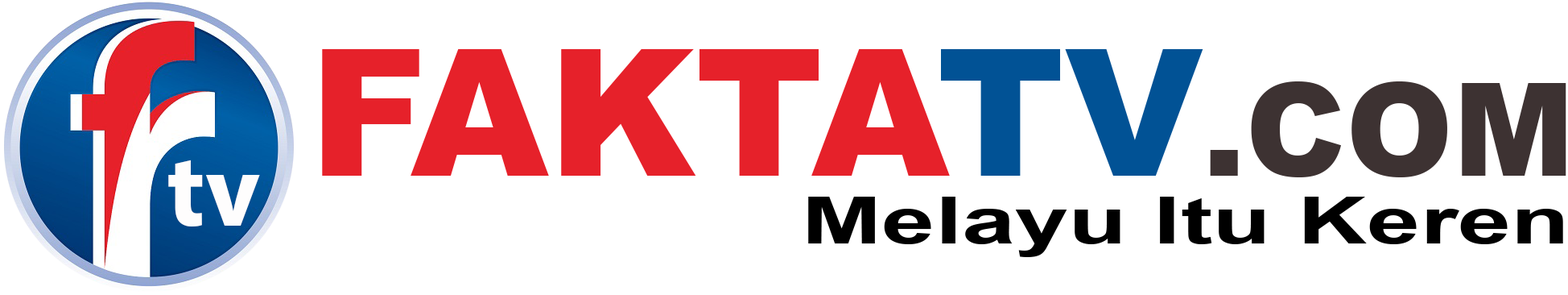
<style>
.page{position:relative;width:1568px;height:295px;background:#ffffff}
.page>*{position:absolute;margin:0}
.t1{font:177.1px "Arial-Black";color:#e6212a}
.t2{font:177.1px "Arial-Black";color:#015295}
.t3{font:128.8px "Arial-Black";color:#3d3232}
.t4{font:64.4px "Arial-BoldMT";color:#000000;scale:1.49 1}
</style>
<div class="page">
<p class="t1" style="left:322px;top:48px;width:1244px;height:129px">FAKTA<span class="t2">TV</span><span class="t3">.COM</span></p>
<p class="t4" style="left:808px;top:196px;width:755px;height:61px">Melayu Itu Keren</p>
</div>
